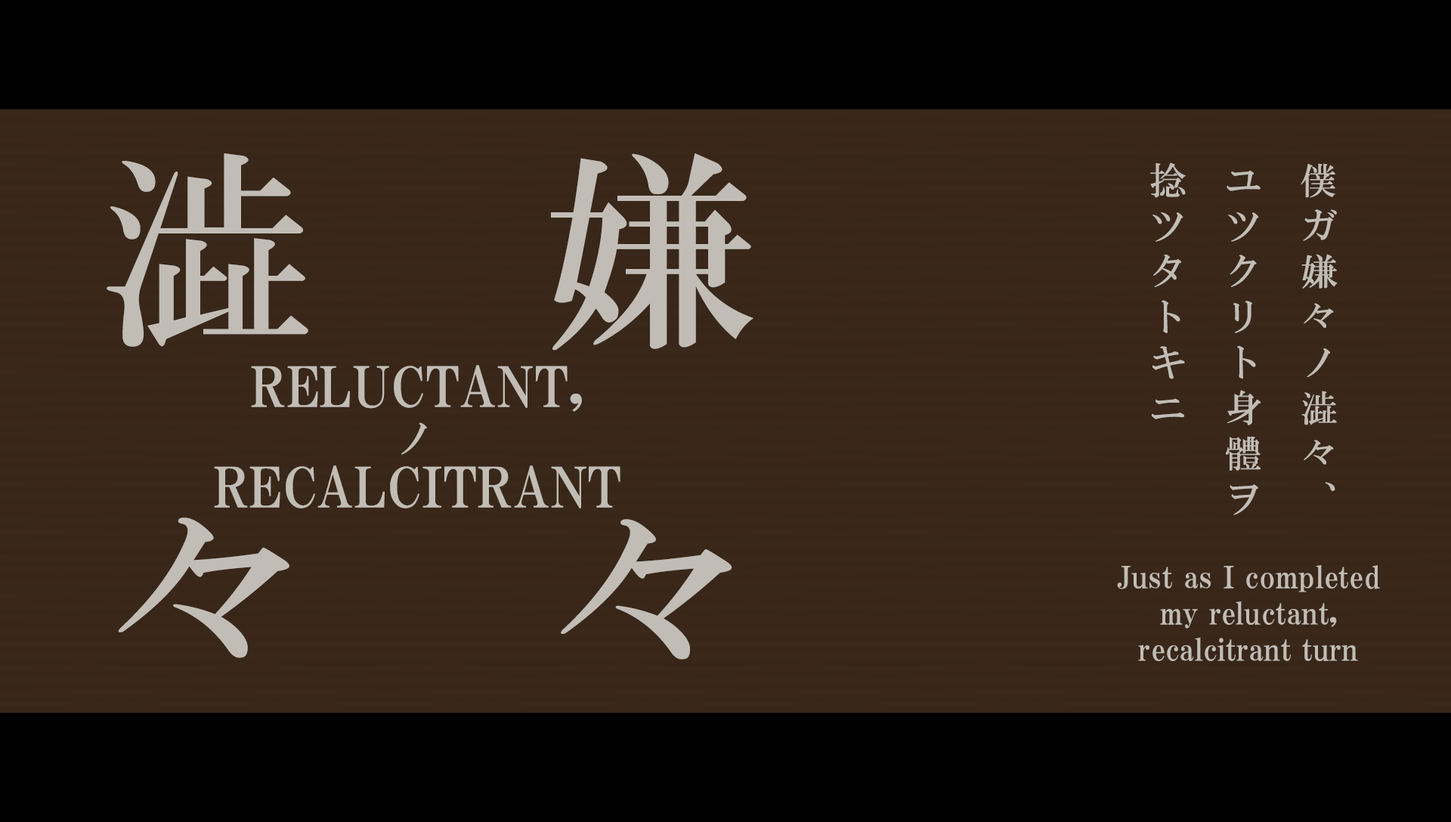
<style>
.page{position:relative;width:1451px;height:822px;background:#382719}
.page>*{position:absolute;margin:0}
.t1{font:213.1px/75.6px "HGMinchoB";letter-spacing:0.62em;color:#c1bdb6}
.t2{font:37px/75.6px "HGMinchoB";letter-spacing:0.23em;color:#c1bdb6}
.t3{font:55.4px/100.7px "HGPMinchoE";letter-spacing:0.025em;color:#c1bdb6;text-transform:uppercase}
.t4{font:40.8px "HGMinchoB";letter-spacing:0.23em;color:#c1bdb6}
.t5{font:30.2px "HGPMinchoE";letter-spacing:0.01em;color:#c1bdb6}
</style>
<div class="page">
<p class="t1" style="left:107px;top:153px;width:201px;height:505px">澁々</p>
<p class="t1" style="left:551px;top:153px;width:202px;height:507px">嫌々</p>
<p class="t2" style="left:1150px;top:162px;width:187px;height:353px">僕ガ嫌々ノ澁々、<br>ユツクリト身體ヲ<br>捻ツタトキニ</p>
<p class="t3" style="left:214px;top:365px;width:406px;height:143px;text-align:center">reluctant,<br>recalcitrant</p>
<p class="t4" style="left:401px;top:422px;width:26px;height:33px">ノ</p>
<p class="t5" style="left:1117px;top:564px;width:263px;height:97px;text-align:center">Just as I completed<br>my reluctant,<br>recalcitrant turn</p>
</div>
